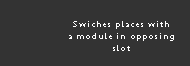
<style>
.page{position:relative;width:190px;height:66px;background:#333333}
.page>*{position:absolute;margin:0}
.t1{font:8px/12px "PTSans-Caption";letter-spacing:0.145em;color:#ffffff}
</style>
<div class="page">
<p class="t1" style="left:69px;top:21px;width:105px;height:30px;text-align:center">Swiches places with<br>a module in opposing<br>slot</p>
</div>
